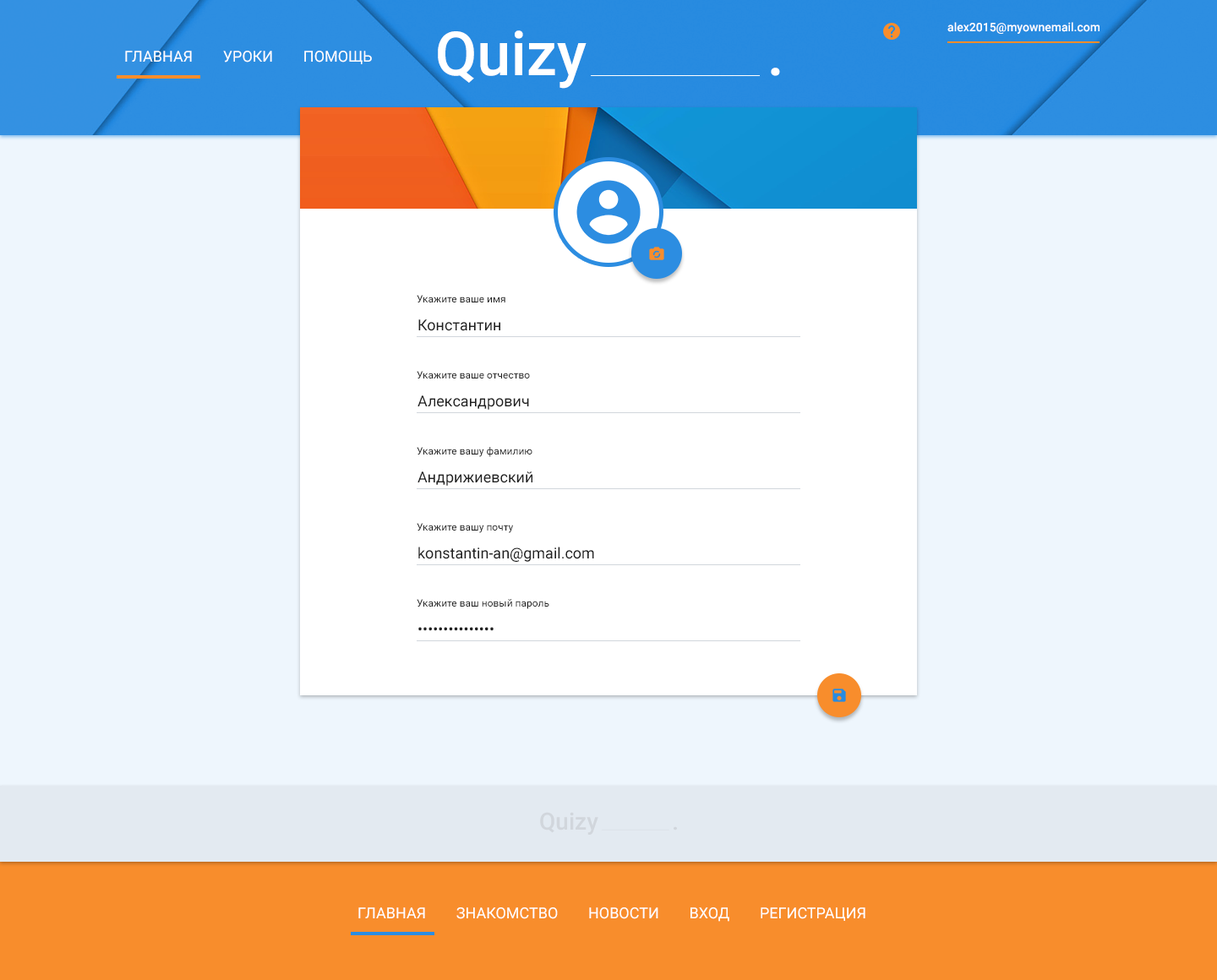
<style>
.page{position:relative;width:1217px;height:980px;background:#eef6fd}
.page>*{position:absolute;margin:0}
.t1{font:11.8px "Roboto-Medium";color:#ffffff}
.t2{font:60.8px "Roboto-Medium";color:#ffffff}
.t3{font:15.2px "Roboto-Regular";color:#ffffff;text-transform:uppercase}
.t4{font:10.1px "Roboto-Regular";color:#212121}
.t5{font:15.2px "Roboto-Regular";color:#212121}
.t6{font:23.7px "Roboto-Medium";color:#d1d6dc}
</style>
<div class="page">
<p class="t1" style="left:947px;top:22px;width:152px;height:12px">alex2015@myownemail.com</p>
<p class="t2" style="left:438px;top:30px;width:148px;height:59px">Quizy</p>
<p class="t3" style="left:125px;top:51px;width:247px;height:13px">Главная        Уроки        Помощь</p>
<p class="t2" style="left:771px;top:68px;width:9px;height:8px">.</p>
<p class="t4" style="left:417px;top:295px;width:88px;height:7px">Укажите ваше имя</p>
<p class="t5" style="left:418px;top:319px;width:82px;height:12px">Константин</p>
<p class="t4" style="left:417px;top:371px;width:113px;height:8px">Укажите ваше отчество</p>
<p class="t5" style="left:417px;top:395px;width:112px;height:15px">Александрович</p>
<p class="t4" style="left:417px;top:447px;width:115px;height:10px">Укажите вашу фамилию</p>
<p class="t5" style="left:417px;top:471px;width:115px;height:15px">Андрижиевский</p>
<p class="t4" style="left:417px;top:523px;width:96px;height:10px">Укажите вашу почту</p>
<p class="t5" style="left:418px;top:547px;width:176px;height:15px">konstantin-an@gmail.com</p>
<p class="t4" style="left:417px;top:599px;width:132px;height:10px">Укажите ваш новый пароль</p>
<p class="t5" style="left:418px;top:627px;width:75px;height:4px">•••••••••••••••</p>
<p class="t6" style="left:540px;top:812px;width:58px;height:23px">Quizy</p>
<p class="t6" style="left:673px;top:826px;width:4px;height:5px">.</p>
<p class="t3" style="left:358px;top:907px;width:507px;height:15px">Главная        Знакомство        Новости        Вход        Регистрация</p>
</div>
